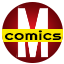
<style>
.page{position:relative;width:64px;height:64px;background:#ffffff}
.page>*{position:absolute;margin:0}
.t1{font:12.9px "Righteous-Regular";letter-spacing:0.01em;color:#000000;scale:1.39 1}
</style>
<div class="page">
<p class="t1" style="left:5px;top:30px;width:57px;height:10px">comics</p>
</div>
